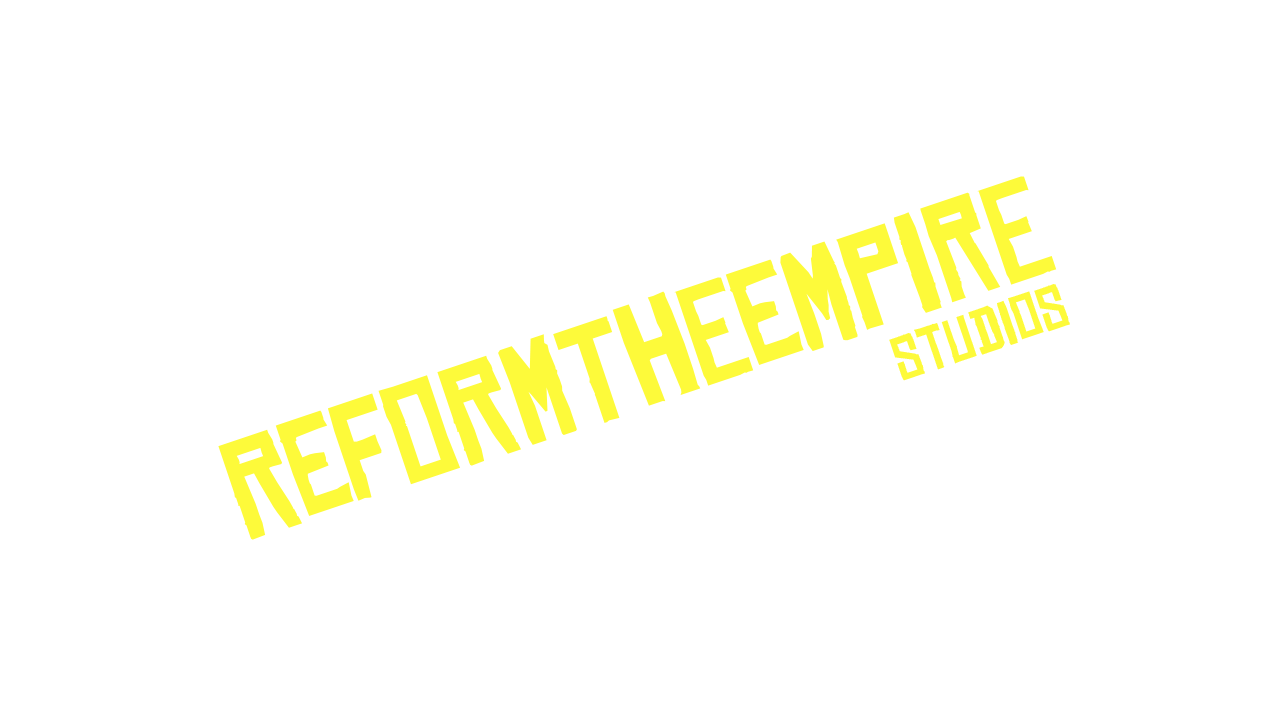
<style>
.page{position:relative;width:1280px;height:720px;background:#ffffff}
.page>*{position:absolute;margin:0}
.t1{font:134.8px "ChineseRocksRg-Regular";color:#fdfa3a}
.t2{font:59.3px "ChineseRocksRg-Regular";color:#fdfa3a}
</style>
<div class="page">
<p class="t1" style="left:218px;top:176px;width:839px;height:364px;rotate:-19deg">ReformTheEmpire</p>
<p class="t2" style="left:889px;top:284px;width:181px;height:97px;rotate:-19deg">Studios</p>
</div>
